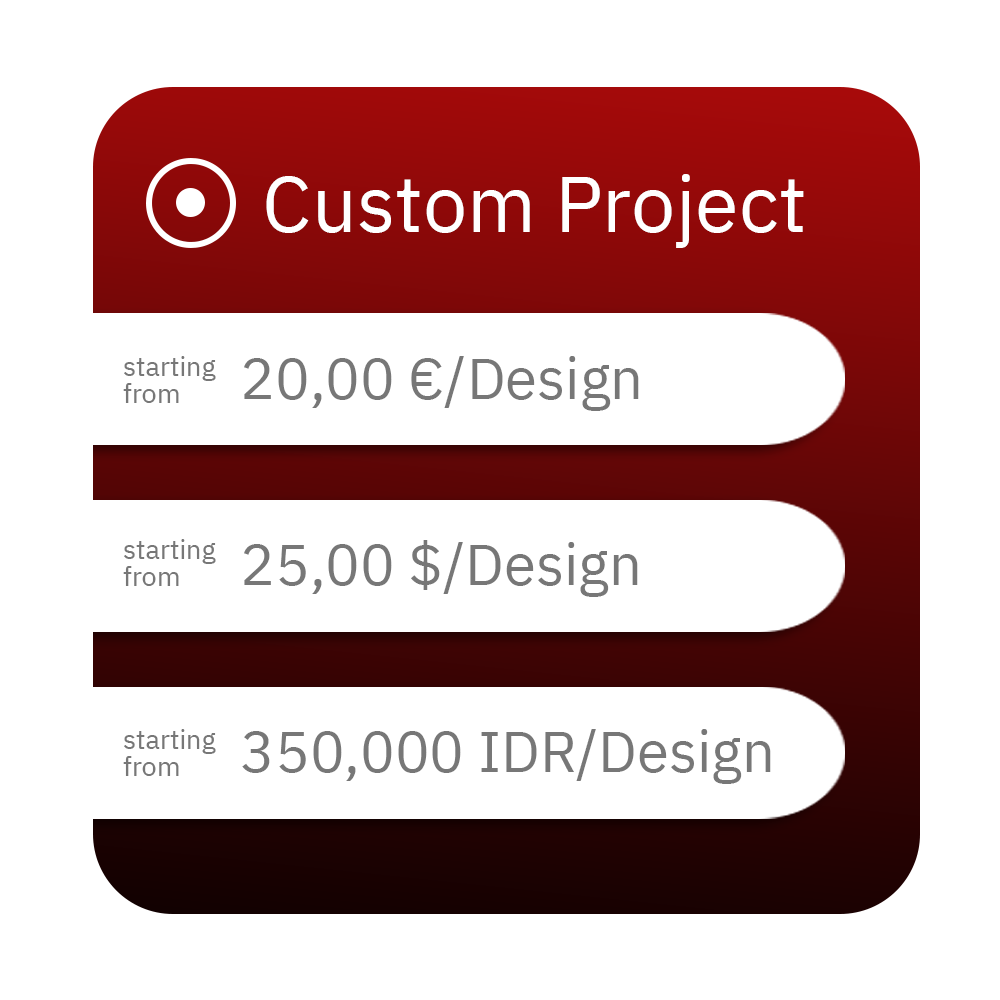
<style>
.page{position:relative;width:1000px;height:1000px;background:#ffffff}
.page>*{position:absolute;margin:0}
.t1{font:136.2px "IBMPlexSans";color:#ffffff}
.t2{font:46.2px/26.9px "IBMPlexSans";color:#777777}
.t3{font:99.1px "IBMPlexSans";color:#777777}
</style>
<div class="page">
<p class="t1" style="left:266px;top:174px;width:538px;height:74px">Custom Project</p>
<p class="t2" style="left:123px;top:356px;width:93px;height:47px">starting<br>from</p>
<p class="t3" style="left:244px;top:356px;width:395px;height:55px">20,00 €/Design</p>
<p class="t2" style="left:123px;top:539px;width:93px;height:47px">starting<br>from</p>
<p class="t3" style="left:244px;top:540px;width:394px;height:57px">25,00 $/Design</p>
<p class="t2" style="left:123px;top:729px;width:93px;height:47px">starting<br>from</p>
<p class="t3" style="left:242px;top:729px;width:529px;height:55px">350,000 IDR/Design</p>
</div>
